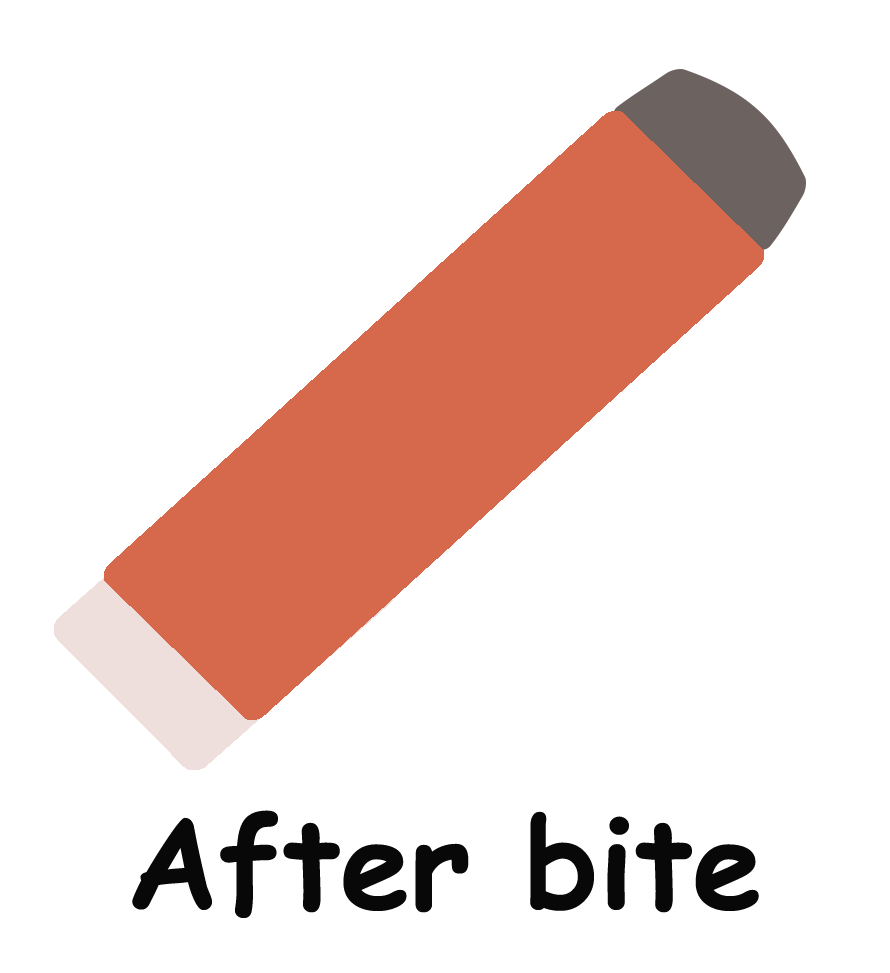
<style>
.page{position:relative;width:890px;height:973px;background:#ffffff}
.page>*{position:absolute;margin:0}
.t1{font:125px "ComicSansMS-Bold";color:#090808}
</style>
<div class="page">
<p class="t1" style="left:132px;top:810px;width:627px;height:108px">After bite</p>
</div>
